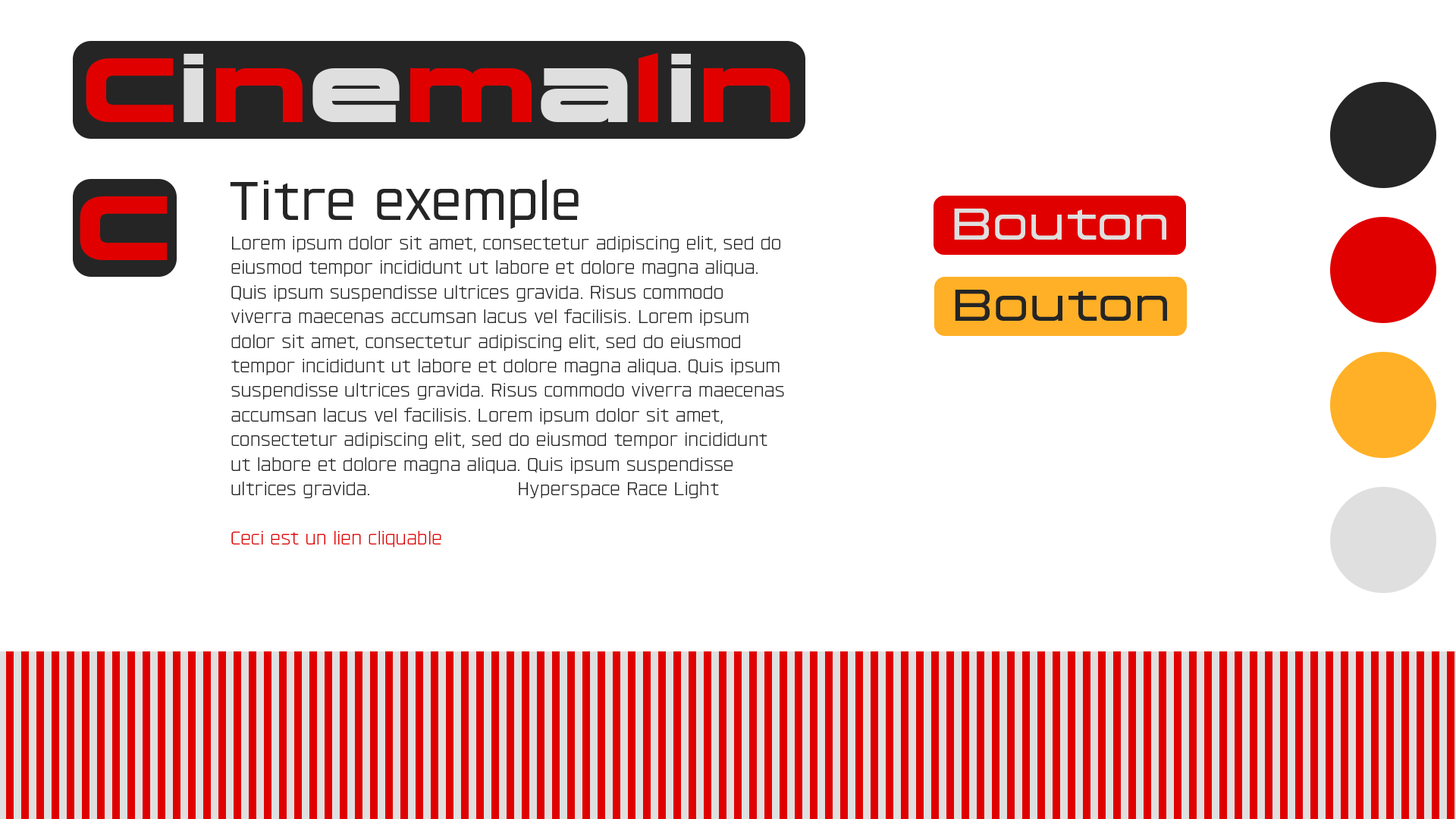
<style>
.page{position:relative;width:1456px;height:819px;background:#ffffff}
.page>*{position:absolute;margin:0}
.t1{font:101.6px "FONTSPRINGDEMO-HyperspaceRaceExtendedLightBold";color:#e00000}
.t2{font:101.6px "FONTSPRINGDEMO-HyperspaceRaceExtendedLightBold";color:#dfdfdf}
.t3{font:60.7px "FONTSPRINGDEMO-HyperspaceRaceRegular";color:#252525}
.t4{font:49.3px "FONTSPRINGDEMO-HyperspaceRaceExpandedRegular";color:#dfdfdf}
.t5{font:20.5px "FONTSPRINGDEMO-HyperspaceRaceLightRegular";color:#252525}
.t6{font:20.5px "FONTSPRINGDEMO-HyperspaceRaceLightRegular";color:#e00000}
.t7{font:49.3px "FONTSPRINGDEMO-HyperspaceRaceExpandedRegular";color:#252525}
</style>
<div class="page">
<p class="t1" style="left:86px;top:52px;width:704px;height:70px">C<span class="t2">i</span>n<span class="t2">e</span>m<span class="t2">a</span>l<span class="t2">i</span>n</p>
<p class="t3" style="left:230px;top:179px;width:349px;height:50px">Titre exemple</p>
<p class="t1" style="left:80px;top:196px;width:88px;height:64px">C</p>
<p class="t4" style="left:954px;top:209px;width:212px;height:31px">Bouton</p>
<p class="t5" style="left:231px;top:235px;width:553px;height:313px">Lorem ipsum dolor sit amet, consectetur adipiscing elit, sed do eiusmod tempor incididunt ut labore et dolore magna aliqua. Quis ipsum suspendisse ultrices gravida. Risus commodo viverra maecenas accumsan lacus vel facilisis. Lorem ipsum dolor sit amet, consectetur adipiscing elit, sed do eiusmod tempor incididunt ut labore et dolore magna aliqua. Quis ipsum suspendisse ultrices gravida. Risus commodo viverra maecenas accumsan lacus vel facilisis. Lorem ipsum dolor sit amet, consectetur adipiscing elit, sed do eiusmod tempor incididunt ut labore et dolore magna aliqua. Quis ipsum suspendisse ultrices gravida.                        Hyperspace Race Light<br><br><span class="t6">Ceci est un lien cliquable</span></p>
<p class="t7" style="left:955px;top:290px;width:212px;height:31px">Bouton</p>
</div>
